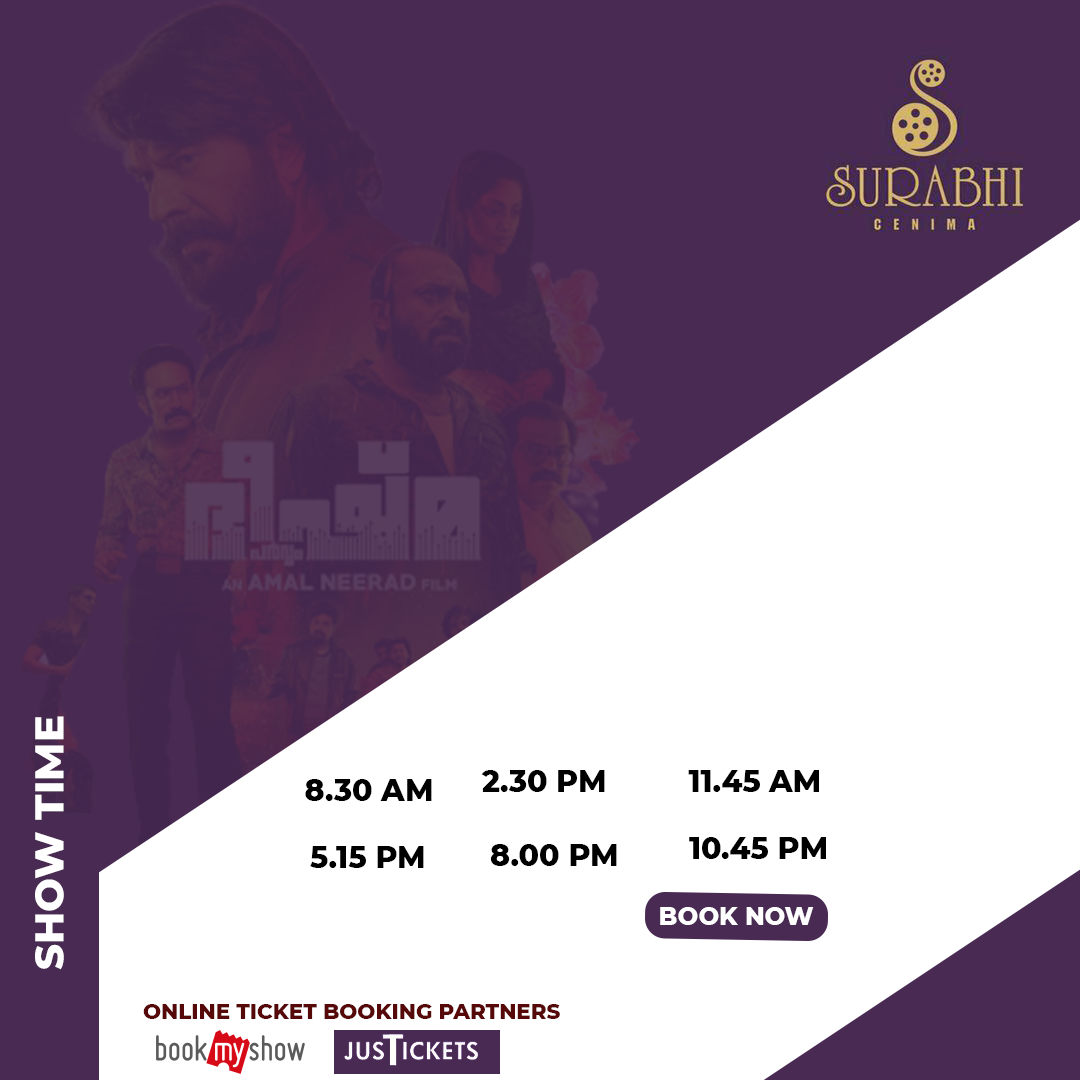
<style>
.page{position:relative;width:1080px;height:1080px;background:#ffffff}
.page>*{position:absolute;margin:0}
.t1{font:40.1px "Montserrat-ExtraBold";color:#ffffff;text-transform:uppercase}
.t2{font:30px "Montserrat-ExtraBold";color:#000000;text-transform:uppercase}
.t3{font:24.5px "Montserrat-ExtraBold";color:#ffffff;text-transform:uppercase}
.t4{font:21.4px "Montserrat-ExtraBold";color:#570909;text-transform:uppercase}
</style>
<div class="page">
<p class="t1" style="left:35px;top:716px;width:29px;height:254px;rotate:-90deg">SHOW TIME</p>
<p class="t2" style="left:481px;top:770px;width:124px;height:22px">2.30 PM</p>
<p class="t2" style="left:688px;top:770px;width:131px;height:22px">11.45 AM</p>
<p class="t2" style="left:305px;top:779px;width:127px;height:22px">8.30 AM</p>
<p class="t2" style="left:310px;top:846px;width:114px;height:22px">5.15 PM</p>
<p class="t2" style="left:490px;top:844px;width:127px;height:22px">8.00 PM</p>
<p class="t2" style="left:689px;top:837px;width:137px;height:22px">10.45 PM</p>
<p class="t3" style="left:660px;top:907px;width:154px;height:18px">BOOK NOW</p>
<p class="t4" style="left:143px;top:1004px;width:417px;height:15px">ONLINE TICKET BOOKING PARTNERS</p>
</div>
